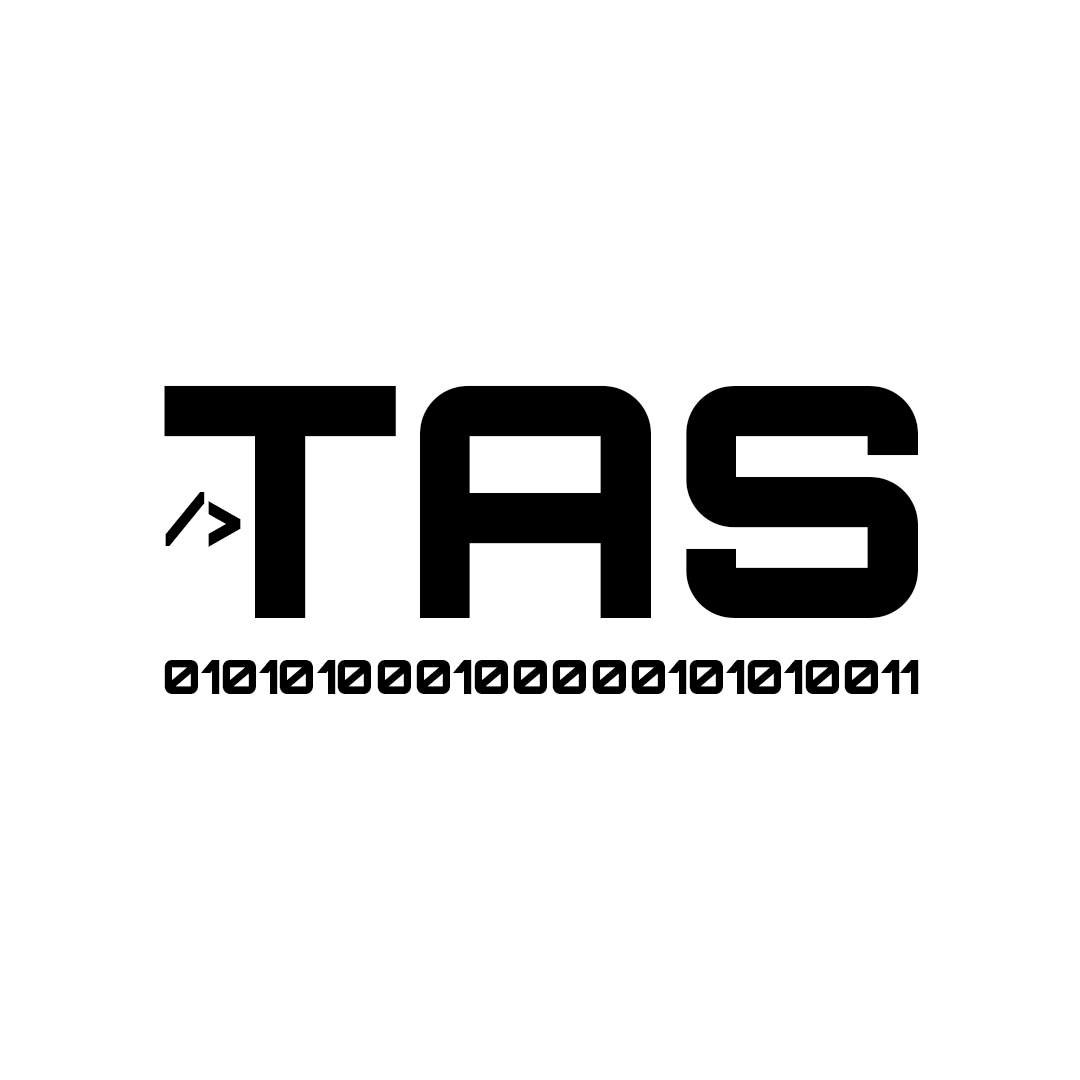
<style>
.page{position:relative;width:1080px;height:1080px;background:#ffffff}
.page>*{position:absolute;margin:0}
.t1{font:321.3px "Orbitron-Black";color:#000000}
.t2{font:75px "Orbitron-Black";color:#000000}
.t3{font:47.2px "Orbitron-Black";color:#000000}
</style>
<div class="page">
<p class="t1" style="left:164px;top:385px;width:754px;height:233px">TAS</p>
<p class="t2" style="left:165px;top:492px;width:76px;height:55px">/&gt;</p>
<p class="t3" style="left:164px;top:660px;width:755px;height:34px">010101000100000101010011</p>
</div>
